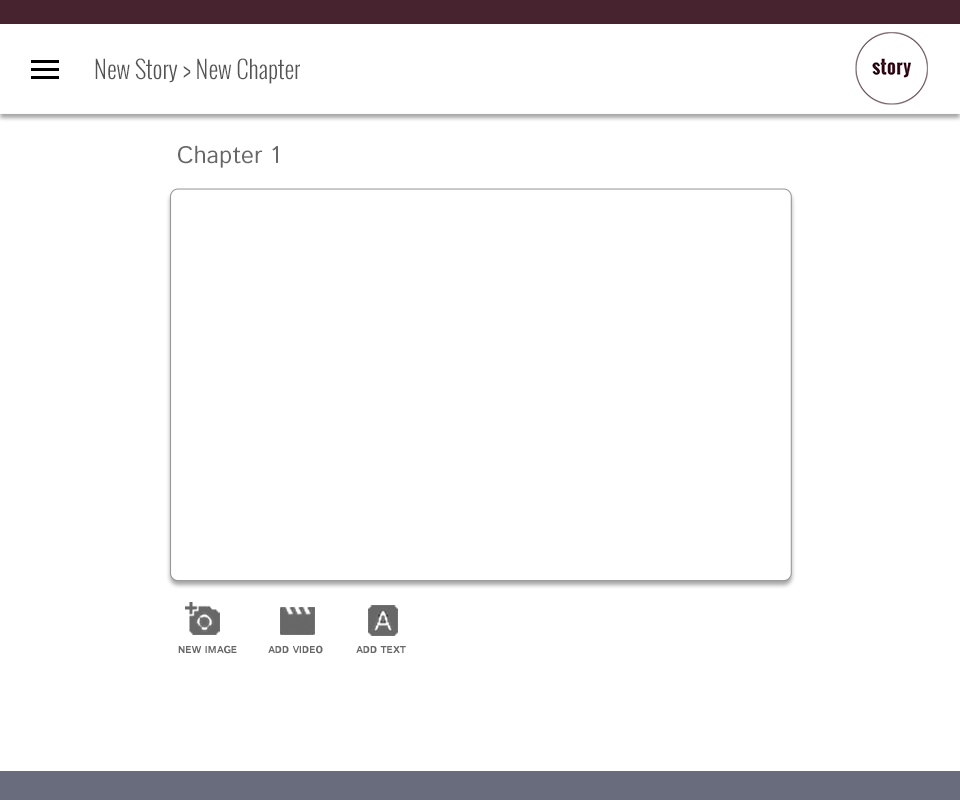
<style>
.page{position:relative;width:960px;height:800px;background:#ffffff}
.page>*{position:absolute;margin:0}
.t1{font:24px "Oswald-Light";color:#545454}
.t2{font:24px "IstokWeb-Regular";color:#676767}
.t3{font:10px "IstokWeb-Bold";color:#676767;text-transform:uppercase}
</style>
<div class="page">
<p class="t1" style="left:95px;top:58px;width:205px;height:26px">New Story &gt; New Chapter</p>
<p class="t2" style="left:178px;top:145px;width:100px;height:23px">Chapter 1</p>
<p class="t3" style="left:178px;top:645px;width:59px;height:9px">New image</p>
<p class="t3" style="left:268px;top:645px;width:55px;height:9px">ADD video</p>
<p class="t3" style="left:356px;top:646px;width:50px;height:7px">Add text</p>
</div>
